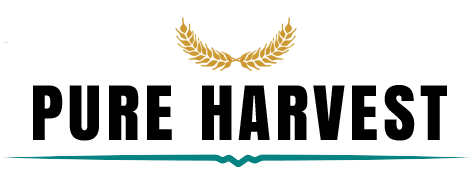
<style>
.page{position:relative;width:473px;height:196px;background:#ffffff}
.page>*{position:absolute;margin:0}
.t1{font:70px "Anton";letter-spacing:0.06em;color:#000000}
</style>
<div class="page">
<p class="t1" style="left:33px;top:85px;width:414px;height:56px">PURE HARVEST</p>
</div>
